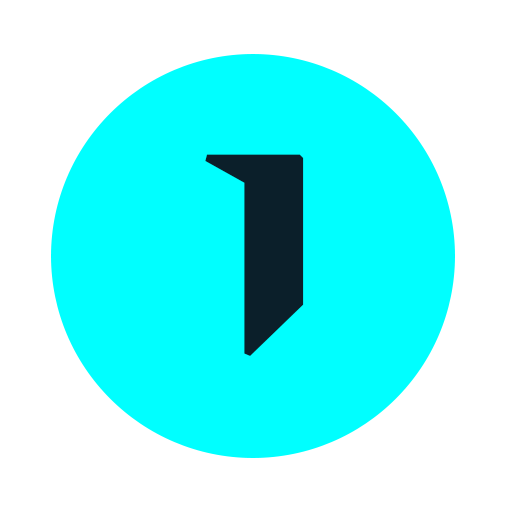
<style>
.page{position:relative;width:512px;height:512px;background:#ffffff}
.page>*{position:absolute;margin:0}
.t1{font:250px "AniMeMatrix-MB_EN";color:#0b1f2a;font-weight:bold}
</style>
<div class="page">
<p class="t1" style="left:205px;top:154px;width:99px;height:202px">1</p>
</div>
